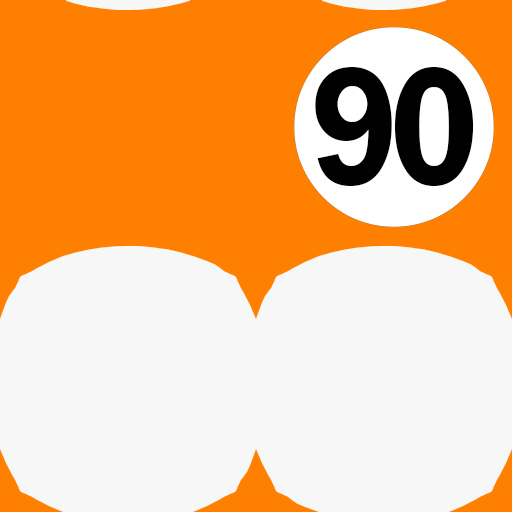
<style>
.page{position:relative;width:512px;height:512px;background:#f7f7f7}
.page>*{position:absolute;margin:0}
.t1{font:172.5px "FranklinGothic-Demi";letter-spacing:-0.05em;color:#010101;scale:0.87 1}
</style>
<div class="page">
<p class="t1" style="left:315px;top:67px;width:159px;height:119px">90</p>
</div>
